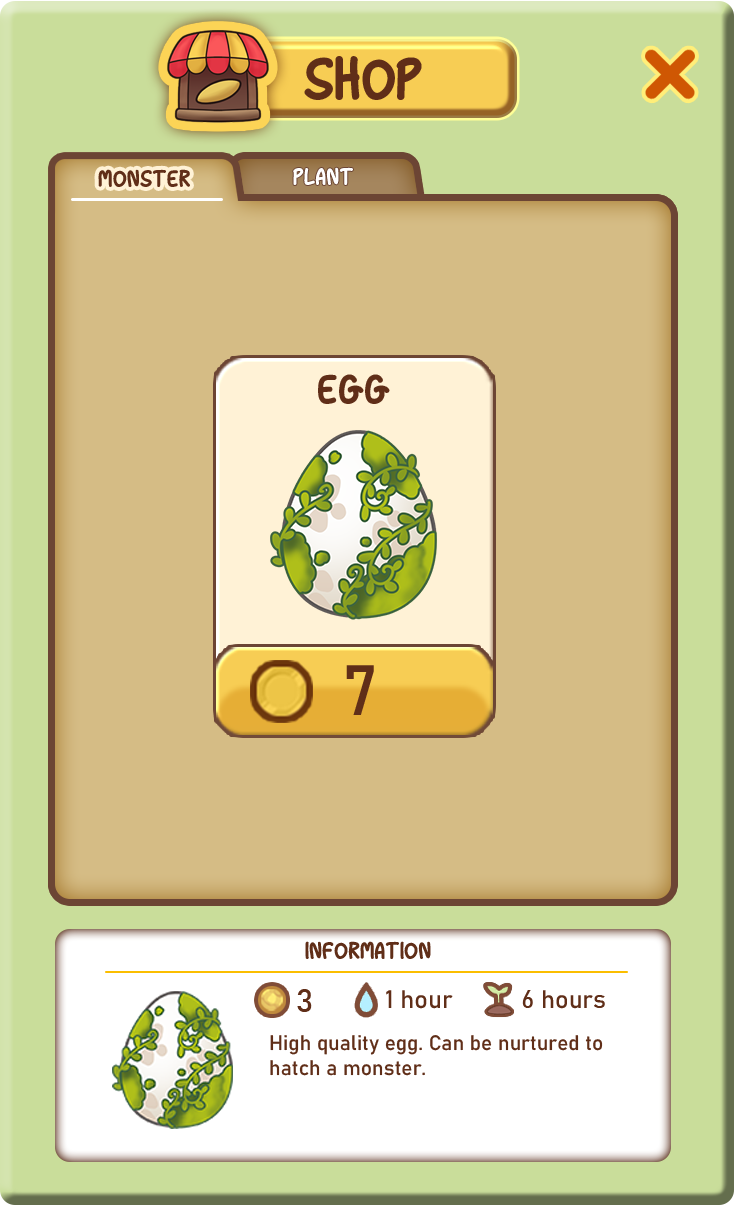
<style>
.page{position:relative;width:734px;height:1205px;background:#d5bc85}
.page>*{position:absolute;margin:0}
.t1{font:62.5px "SnowDrop";color:#602e18}
.t2{font:25px "SnowDrop";color:#602e18}
.t3{font:25px "SnowDrop";color:#ffffff}
.t4{font:43.7px "SnowDrop";color:#602e18}
.t5{font:69.9px "Bahnschrift";color:#602e18}
.t6{font:33.3px "Bahnschrift";color:#602e18}
.t7{font:25px "Bahnschrift";color:#602e18}
.t8{font:20.8px "Bahnschrift";color:#602e18}
</style>
<div class="page">
<p class="t1" style="left:304px;top:56px;width:118px;height:44px">SHOP</p>
<p class="t2" style="left:98px;top:169px;width:92px;height:18px">monster</p>
<p class="t3" style="left:293px;top:167px;width:60px;height:18px">PLANT</p>
<p class="t4" style="left:318px;top:374px;width:72px;height:30px">EGG</p>
<p class="t5" style="left:346px;top:665px;width:28px;height:50px">7</p>
<p class="t2" style="left:305px;top:941px;width:126px;height:18px">information</p>
<p class="t6" style="left:297px;top:989px;width:15px;height:23px">3</p>
<p class="t7" style="left:386px;top:990px;width:67px;height:19px">1 hour</p>
<p class="t7" style="left:522px;top:990px;width:83px;height:19px">6 hours</p>
<p class="t8" style="left:270px;top:1035px;width:333px;height:41px">High quality egg. Can be nurtured to hatch a monster.</p>
</div>
